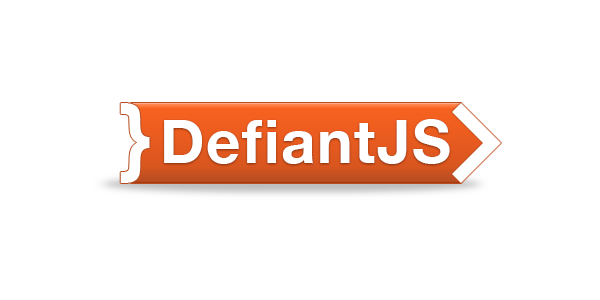
<style>
.page{position:relative;width:600px;height:300px;background:#ffffff}
.page>*{position:absolute;margin:0}
.t1{font:60px "HelveticaNeue-Bold";letter-spacing:0.028em;color:#ffffff}
</style>
<div class="page">
<p class="t1" style="left:164px;top:119px;width:286px;height:45px">DefiantJS</p>
</div>
